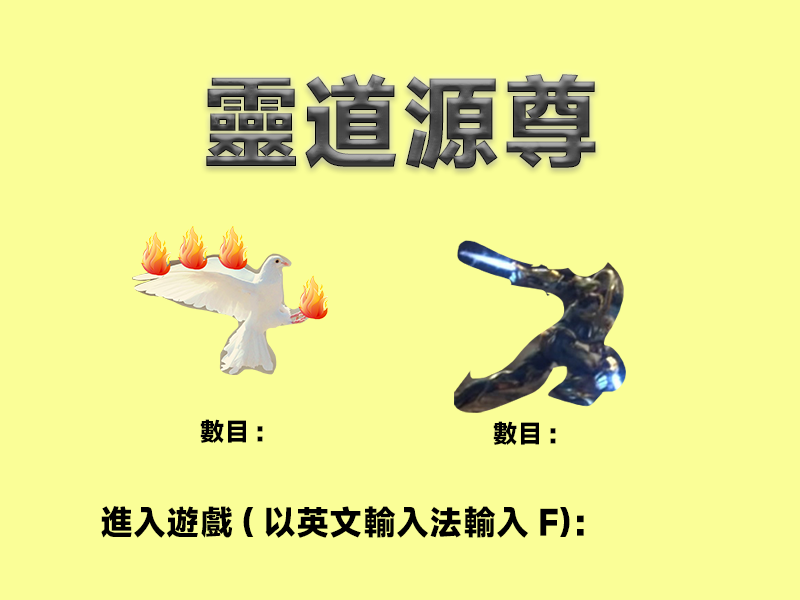
<style>
.page{position:relative;width:800px;height:600px;background:#fafe97}
.page>*{position:absolute;margin:0}
.t1{font:100px "MiSans-Heavy"}
.t2{font:25px "MiSans-Heavy";color:#000000}
.t3{font:33.3px "MiSans-Heavy";color:#000000}
</style>
<div class="page">
<p class="t1" style="left:206px;top:74px;width:390px;height:95px">靈道源尊</p>
<p class="t2" style="left:200px;top:419px;width:63px;height:24px">數目:</p>
<p class="t2" style="left:493px;top:421px;width:63px;height:24px">數目:</p>
<p class="t3" style="left:101px;top:506px;width:483px;height:32px">進入遊戲(以英文輸入法輸入F)：</p>
</div>
